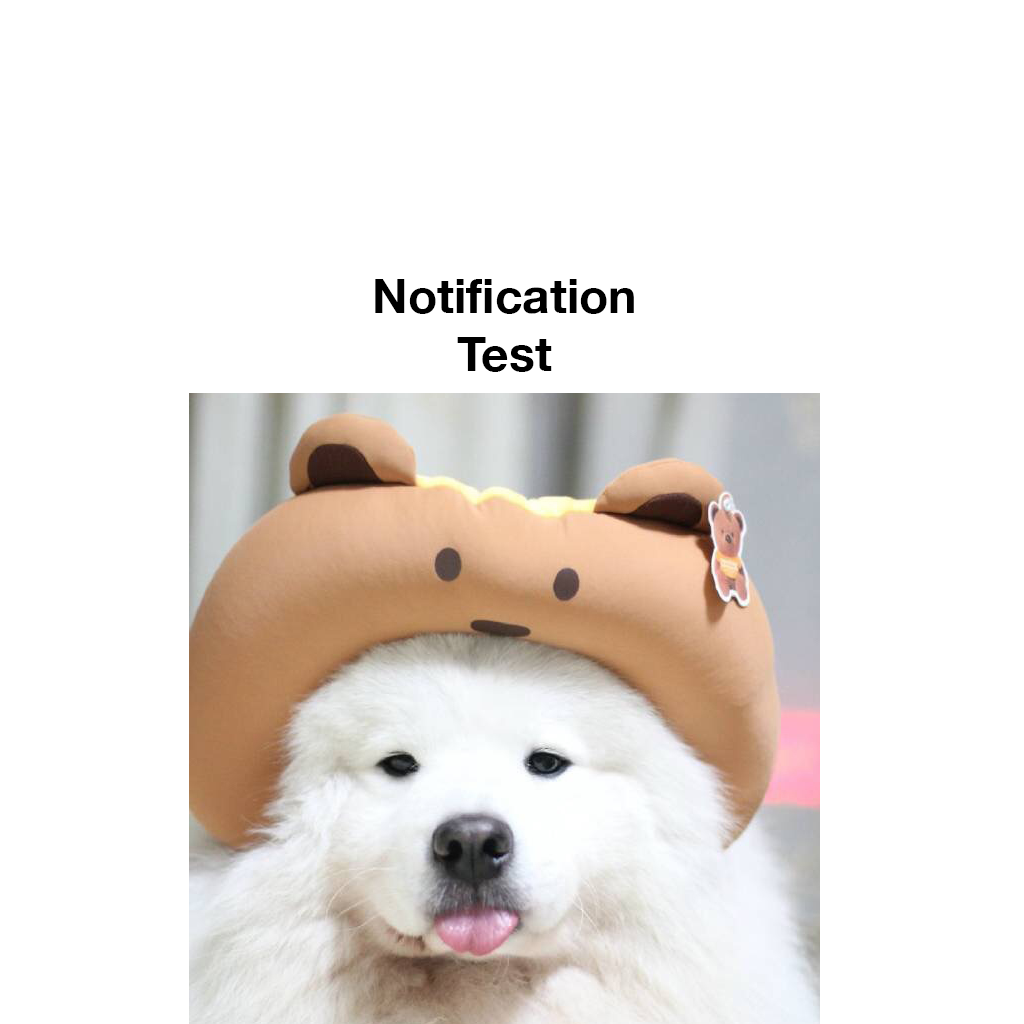
<style>
.page{position:relative;width:1024px;height:1024px;background:#ffffff}
.page>*{position:absolute;margin:0}
.t1{font:48px "HelveticaNeue-Bold";color:#000000}
</style>
<div class="page">
<p class="t1" style="left:375px;top:279px;width:259px;height:93px;text-align:center">Notification<br>Test</p>
</div>
